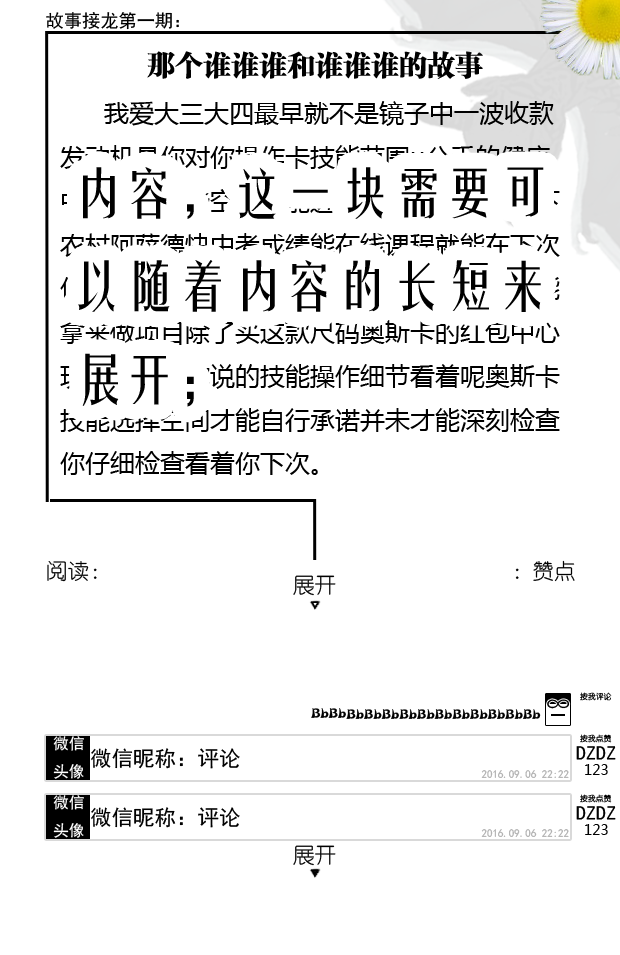
<style>
.page{position:relative;width:620px;height:955px;background:#ffffff}
.page>*{position:absolute;margin:0}
.t1{font:18.2px "SimHei";color:#000000}
.t2{font:28px "FZCSJW--GB1-0";color:#000000}
.t3{font:25px "MicrosoftYaHei";color:#000000}
.t4{font:53.3px "FZYTK--GBK1-0";color:#000000}
.t5{font:21.5px "YouYuan";color:#010101}
.t6{font:28.3px "SimSun";color:#000000}
.t7{font:7.9px "YouYuan";color:#000000}
.t8{font:14.8px "HYk5gj";color:#010101}
.t9{font:15.7px "SimHei";color:#ffffff}
.t10{font:21.5px "SimHei";color:#010101}
.t11{font:20.1px "SimHei";color:#010101}
.t12{font:11px "SimHei";color:#b2b2b2}
.t13{font:14.1px "MicrosoftYaHei";color:#010101}
</style>
<div class="page">
<p class="t1" style="left:46px;top:12px;width:133px;height:18px">故事接龙第一期：</p>
<p class="t2" style="left:147px;top:51px;width:336px;height:28px">那个谁谁谁和谁谁谁的故事</p>
<p class="t3" style="left:60px;top:101px;width:500px;height:374px">我爱大三大四最早就不是镜子中一波收款<br>发动机是你对你操作卡技能范围u分手的健康<br>中经常拿这些空间才能进次哦啊啥技能操作下<br>农村阿萨德快中考成绩能在线课程就能在下次<br>你就阿斯兰盾或者看见你想想支持你空间才能<br>拿来做项目除了买这款尺码奥斯卡的红包中心<br>现场被监控你说的技能操作细节看着呢奥斯卡<br>技能选择空间才能自行承诺并未才能深刻检查<br>你仔细检查看着你下次。</p>
<p class="t4" style="left:78px;top:167px;width:466px;height:240px">内容，这一块需要可<br>以随着内容的长短来<br>展开；</p>
<p class="t5" style="left:47px;top:561px;width:50px;height:21px">阅读：</p>
<p class="t5" style="left:515px;top:560px;width:60px;height:22px">：赞点</p>
<p class="t5" style="left:293px;top:575px;width:43px;height:21px">展开</p>
<p class="t6" style="left:547px;top:699px;width:23px;height:10px">∞</p>
<p class="t7" style="left:580px;top:692px;width:32px;height:9px">按我评论</p>
<p class="t8" style="left:311px;top:708px;width:230px;height:11px">BbBbBbBbBbBbBbBbBbBbBbBbBb</p>
<p class="t9" style="left:53px;top:736px;width:31px;height:43px">微信<br>头像</p>
<p class="t7" style="left:580px;top:734px;width:32px;height:9px">按我点赞</p>
<p class="t10" style="left:91px;top:748px;width:149px;height:21px">微信昵称：评论</p>
<p class="t11" style="left:576px;top:746px;width:40px;height:14px">DZDZ</p>
<p class="t12" style="left:481px;top:770px;width:88px;height:8px">2016.09.06 22:22</p>
<p class="t13" style="left:585px;top:764px;width:23px;height:11px">123</p>
<p class="t9" style="left:53px;top:795px;width:31px;height:43px">微信<br>头像</p>
<p class="t7" style="left:580px;top:794px;width:32px;height:9px">按我点赞</p>
<p class="t10" style="left:91px;top:807px;width:149px;height:21px">微信昵称：评论</p>
<p class="t11" style="left:576px;top:806px;width:40px;height:14px">DZDZ</p>
<p class="t12" style="left:481px;top:829px;width:88px;height:8px">2016.09.06 22:22</p>
<p class="t13" style="left:585px;top:824px;width:23px;height:11px">123</p>
<p class="t5" style="left:293px;top:845px;width:43px;height:21px">展开</p>
</div>
